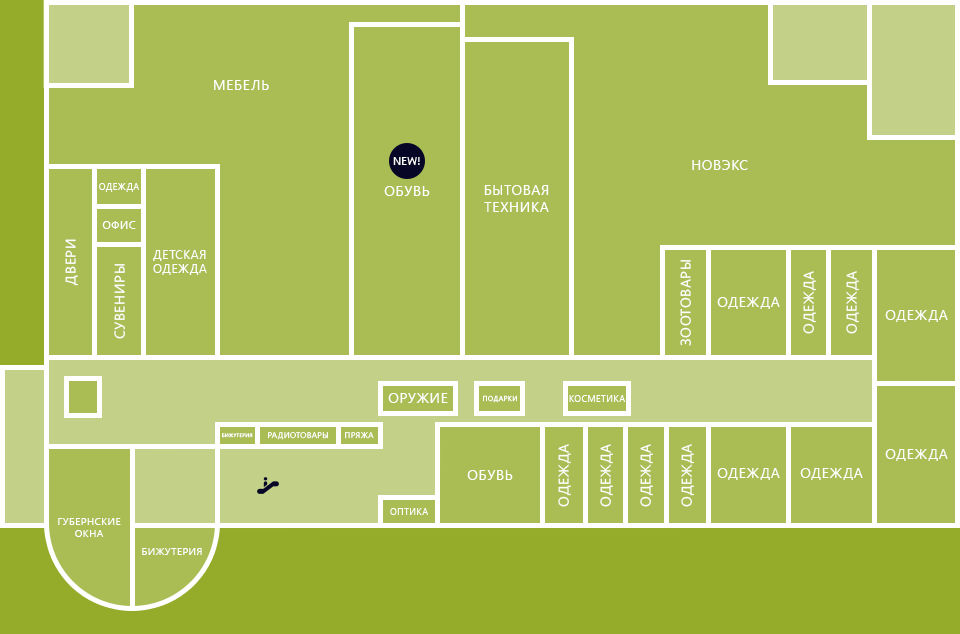
<style>
.page{position:relative;width:960px;height:634px;background:#a9bd54}
.page>*{position:absolute;margin:0}
.t1{font:14px "SegoeUI";letter-spacing:0.05em;color:#ffffff;text-transform:uppercase}
.t2{font:9px "SegoeUI";letter-spacing:0.05em;color:#ffffff;text-transform:uppercase}
.t3{font:11px "SegoeUI";letter-spacing:0.05em;color:#ffffff;text-transform:uppercase}
.t4{font:12px "SegoeUI";letter-spacing:0.05em;color:#ffffff;text-transform:uppercase}
.t5{font:7px "SegoeUI";letter-spacing:0.05em;color:#ffffff;text-transform:uppercase}
.t6{font:5px "SegoeUI";letter-spacing:0.05em;color:#ffffff;text-transform:uppercase}
.t7{font:8px "SegoeUI";letter-spacing:0.05em;color:#ffffff;text-transform:uppercase}
.t8{font:10px "SegoeUI";letter-spacing:0.05em;color:#ffffff;text-transform:uppercase}
</style>
<div class="page">
<p class="t1" style="left:214px;top:80px;width:55px;height:10px">Мебель</p>
<p class="t1" style="left:692px;top:160px;width:56px;height:10px">Новэкс</p>
<p class="t2" style="left:99px;top:183px;width:40px;height:9px">Одежда</p>
<p class="t1" style="left:484px;top:185px;width:65px;height:27px;text-align:center">Бытовая<br>техника</p>
<p class="t1" style="left:384px;top:186px;width:46px;height:10px">Обувь</p>
<p class="t3" style="left:102px;top:221px;width:34px;height:8px">Офис</p>
<p class="t1" style="left:65px;top:239px;width:13px;height:47px;rotate:-90deg">Двери</p>
<p class="t4" style="left:153px;top:250px;width:54px;height:25px;text-align:center">Детская<br>одежда</p>
<p class="t1" style="left:114px;top:264px;width:11px;height:75px;rotate:-90deg">Сувениры</p>
<p class="t1" style="left:680px;top:260px;width:11px;height:86px;rotate:-90deg">Зоотовары</p>
<p class="t1" style="left:803px;top:271px;width:13px;height:63px;rotate:-90deg">Одежда</p>
<p class="t1" style="left:846px;top:271px;width:13px;height:63px;rotate:-90deg">Одежда</p>
<p class="t1" style="left:717px;top:297px;width:63px;height:12px">Одежда</p>
<p class="t1" style="left:885px;top:310px;width:63px;height:12px">Одежда</p>
<p class="t1" style="left:388px;top:393px;width:60px;height:10px">Оружие</p>
<p class="t5" style="left:483px;top:395px;width:34px;height:8px">Подарки</p>
<p class="t2" style="left:569px;top:395px;width:56px;height:7px">Косметика</p>
<p class="t6" style="left:222px;top:433px;width:31px;height:5px">Бижутерия</p>
<p class="t7" style="left:268px;top:432px;width:60px;height:8px">Радиотовары</p>
<p class="t7" style="left:345px;top:432px;width:29px;height:7px">Пряжа</p>
<p class="t1" style="left:558px;top:444px;width:13px;height:63px;rotate:-90deg">Одежда</p>
<p class="t1" style="left:600px;top:444px;width:13px;height:63px;rotate:-90deg">Одежда</p>
<p class="t1" style="left:640px;top:444px;width:13px;height:63px;rotate:-90deg">Одежда</p>
<p class="t1" style="left:681px;top:444px;width:13px;height:63px;rotate:-90deg">Одежда</p>
<p class="t1" style="left:885px;top:449px;width:63px;height:12px">Одежда</p>
<p class="t1" style="left:467px;top:470px;width:46px;height:10px">Обувь</p>
<p class="t1" style="left:717px;top:468px;width:63px;height:12px">Одежда</p>
<p class="t1" style="left:800px;top:468px;width:63px;height:12px">Одежда</p>
<p class="t2" style="left:390px;top:508px;width:38px;height:7px">Оптика</p>
<p class="t8" style="left:58px;top:518px;width:63px;height:19px;text-align:center">Губернские<br>окна</p>
<p class="t8" style="left:142px;top:548px;width:60px;height:7px">Бижутерия</p>
</div>
